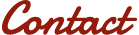
<style>
.page{position:relative;width:139px;height:35px;background:#ffffff}
.page>*{position:absolute;margin:0}
.t1{font:48px "Damion";color:#931b0c}
</style>
<div class="page">
<p class="t1" style="left:2px;top:0px;width:135px;height:35px">Contact</p>
</div>
